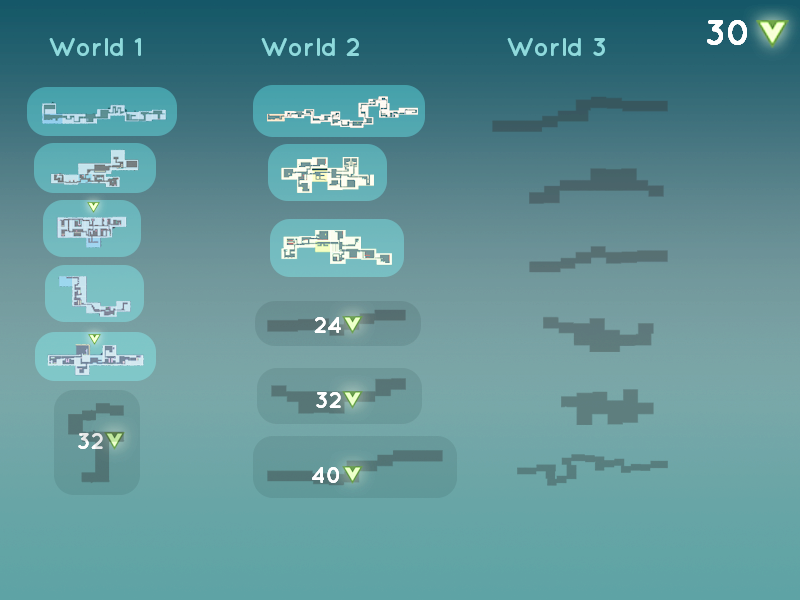
<style>
.page{position:relative;width:800px;height:600px}
.page>*{position:absolute;margin:0}
.t1{font:35.8px "Quicksand-Bold";color:#ffffff}
.t2{font:26px "Quicksand-Bold";color:#7ed6d7}
.t3{font:23px "Quicksand-Bold";color:#ffffff}
</style>
<div class="page">
<p class="t1" style="left:707px;top:20px;width:40px;height:25px">30</p>
<p class="t2" style="left:49px;top:38px;width:92px;height:18px">World 1</p>
<p class="t2" style="left:261px;top:38px;width:98px;height:18px">World 2</p>
<p class="t2" style="left:507px;top:38px;width:98px;height:18px">World 3</p>
<p class="t3" style="left:314px;top:317px;width:27px;height:16px">24</p>
<p class="t3" style="left:316px;top:392px;width:25px;height:16px">32</p>
<p class="t3" style="left:78px;top:433px;width:25px;height:16px">32</p>
<p class="t3" style="left:312px;top:467px;width:27px;height:16px">40</p>
</div>
